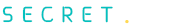
<style>
.page{position:relative;width:172px;height:27px;background:#ffffff}
.page>*{position:absolute;margin:0}
.t1{font:22px "BauhausITC";letter-spacing:-0.1em;color:#02c1bf}
</style>
<div class="page">
<p class="t1" style="left:2px;top:6px;width:111px;height:17px">ＳＥＣＲＥＴ</p>
</div>
